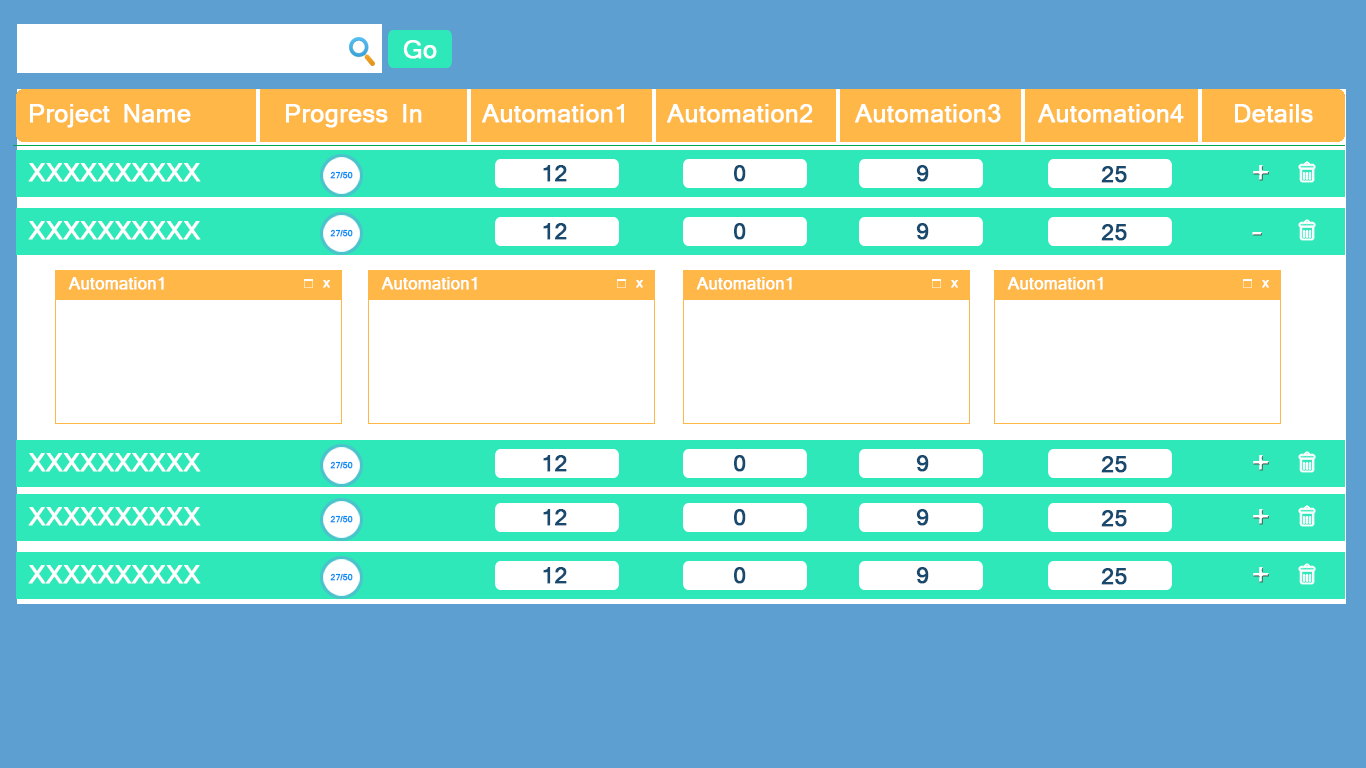
<style>
.page{position:relative;width:1366px;height:768px;background:#ffffff}
.page>*{position:absolute;margin:0}
.t1{font:23.9px "Mangal";color:#ffffff;font-weight:bold}
.t2{font:8.1px "Mangal";color:#008bf6;font-weight:bold}
.t3{font:21.9px "Mangal";color:#18496e;font-weight:bold}
.t4{font:29.9px "Mangal";color:#ffffff;font-weight:bold}
.t5{font:15.9px "Mangal";color:#ffffff;font-weight:bold}
.t6{font:13px "Mangal";color:#ffffff;font-weight:bold}
</style>
<div class="page">
<p class="t1" style="left:403px;top:40px;width:34px;height:19px">Go</p>
<p class="t1" style="left:30px;top:104px;width:161px;height:24px">Project Name</p>
<p class="t1" style="left:286px;top:104px;width:136px;height:24px">Progress In</p>
<p class="t1" style="left:482px;top:104px;width:142px;height:19px">Automation1</p>
<p class="t1" style="left:667px;top:104px;width:146px;height:19px">Automation2</p>
<p class="t1" style="left:855px;top:104px;width:146px;height:19px">Automation3</p>
<p class="t1" style="left:1038px;top:104px;width:146px;height:19px">Automation4</p>
<p class="t1" style="left:1235px;top:104px;width:78px;height:19px">Details</p>
<p class="t1" style="left:28px;top:163px;width:173px;height:19px">XXXXXXXXXX</p>
<p class="t2" style="left:330px;top:171px;width:23px;height:8px">27/50</p>
<p class="t3" style="left:543px;top:165px;width:24px;height:17px">12</p>
<p class="t3" style="left:734px;top:165px;width:12px;height:17px">0</p>
<p class="t3" style="left:916px;top:165px;width:13px;height:17px">9</p>
<p class="t3" style="left:1101px;top:166px;width:26px;height:17px">25</p>
<p class="t4" style="left:1253px;top:165px;width:16px;height:16px">+</p>
<p class="t1" style="left:28px;top:221px;width:173px;height:19px">XXXXXXXXXX</p>
<p class="t2" style="left:330px;top:229px;width:23px;height:8px">27/50</p>
<p class="t3" style="left:543px;top:223px;width:24px;height:17px">12</p>
<p class="t3" style="left:734px;top:223px;width:12px;height:17px">0</p>
<p class="t3" style="left:916px;top:223px;width:13px;height:17px">9</p>
<p class="t3" style="left:1101px;top:224px;width:26px;height:17px">25</p>
<p class="t4" style="left:1252px;top:232px;width:10px;height:4px">-</p>
<p class="t5" style="left:68px;top:277px;width:96px;height:13px">Automation1</p>
<p class="t6" style="left:323px;top:280px;width:7px;height:8px">x</p>
<p class="t5" style="left:381px;top:277px;width:96px;height:13px">Automation1</p>
<p class="t6" style="left:636px;top:280px;width:7px;height:8px">x</p>
<p class="t5" style="left:696px;top:277px;width:96px;height:13px">Automation1</p>
<p class="t6" style="left:951px;top:280px;width:7px;height:8px">x</p>
<p class="t5" style="left:1007px;top:277px;width:96px;height:13px">Automation1</p>
<p class="t6" style="left:1262px;top:280px;width:7px;height:8px">x</p>
<p class="t1" style="left:28px;top:453px;width:173px;height:19px">XXXXXXXXXX</p>
<p class="t2" style="left:330px;top:461px;width:23px;height:8px">27/50</p>
<p class="t3" style="left:543px;top:455px;width:24px;height:17px">12</p>
<p class="t3" style="left:734px;top:455px;width:12px;height:17px">0</p>
<p class="t3" style="left:916px;top:455px;width:13px;height:17px">9</p>
<p class="t3" style="left:1101px;top:456px;width:26px;height:17px">25</p>
<p class="t4" style="left:1253px;top:455px;width:16px;height:16px">+</p>
<p class="t1" style="left:28px;top:507px;width:173px;height:19px">XXXXXXXXXX</p>
<p class="t3" style="left:543px;top:509px;width:24px;height:17px">12</p>
<p class="t3" style="left:734px;top:509px;width:12px;height:17px">0</p>
<p class="t3" style="left:916px;top:509px;width:13px;height:17px">9</p>
<p class="t3" style="left:1101px;top:510px;width:26px;height:17px">25</p>
<p class="t4" style="left:1253px;top:509px;width:16px;height:16px">+</p>
<p class="t2" style="left:330px;top:515px;width:23px;height:8px">27/50</p>
<p class="t1" style="left:28px;top:565px;width:173px;height:19px">XXXXXXXXXX</p>
<p class="t3" style="left:543px;top:567px;width:24px;height:17px">12</p>
<p class="t3" style="left:734px;top:567px;width:12px;height:17px">0</p>
<p class="t3" style="left:916px;top:567px;width:13px;height:17px">9</p>
<p class="t3" style="left:1101px;top:568px;width:26px;height:17px">25</p>
<p class="t4" style="left:1253px;top:567px;width:16px;height:16px">+</p>
<p class="t2" style="left:330px;top:573px;width:23px;height:8px">27/50</p>
</div>
